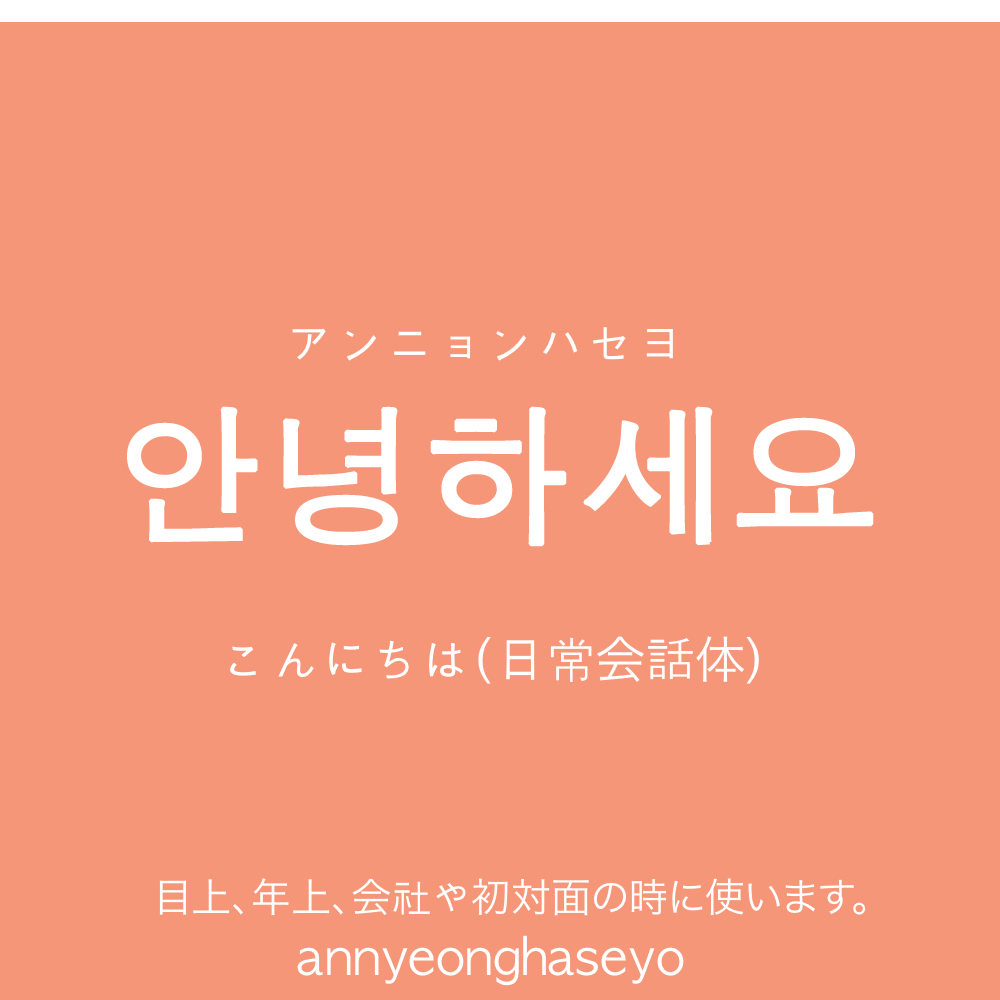
<style>
.page{position:relative;width:1000px;height:1000px;background:#f69679}
.page>*{position:absolute;margin:0}
.t1{font:50px "AppleGothic";color:#ffffff}
.t2{font:150px "AppleGothic";color:#ffffff;font-weight:bold}
.t3{font:50px "HiraKakuProN-W3";color:#ffffff}
.t4{font:40px "HiraKakuProN-W3";color:#ffffff}
.t5{font:40px "AppleGothic";color:#ffffff}
</style>
<div class="page">
<p class="t1" style="left:292px;top:327px;width:381px;height:34px">アンニョンハセヨ</p>
<p class="t2" style="left:127px;top:406px;width:747px;height:141px">안녕하세요</p>
<p class="t1" style="left:230px;top:636px;width:529px;height:48px">こんにちは(日常<span class="t3">会</span>話<span class="t3">体</span>）</p>
<p class="t4" style="left:159px;top:878px;width:707px;height:38px">目上、年上、会<span class="t5">社や</span>初対面の時に使います。</p>
<p class="t1" style="left:297px;top:935px;width:387px;height:51px">annyeonghaseyo</p>
</div>
